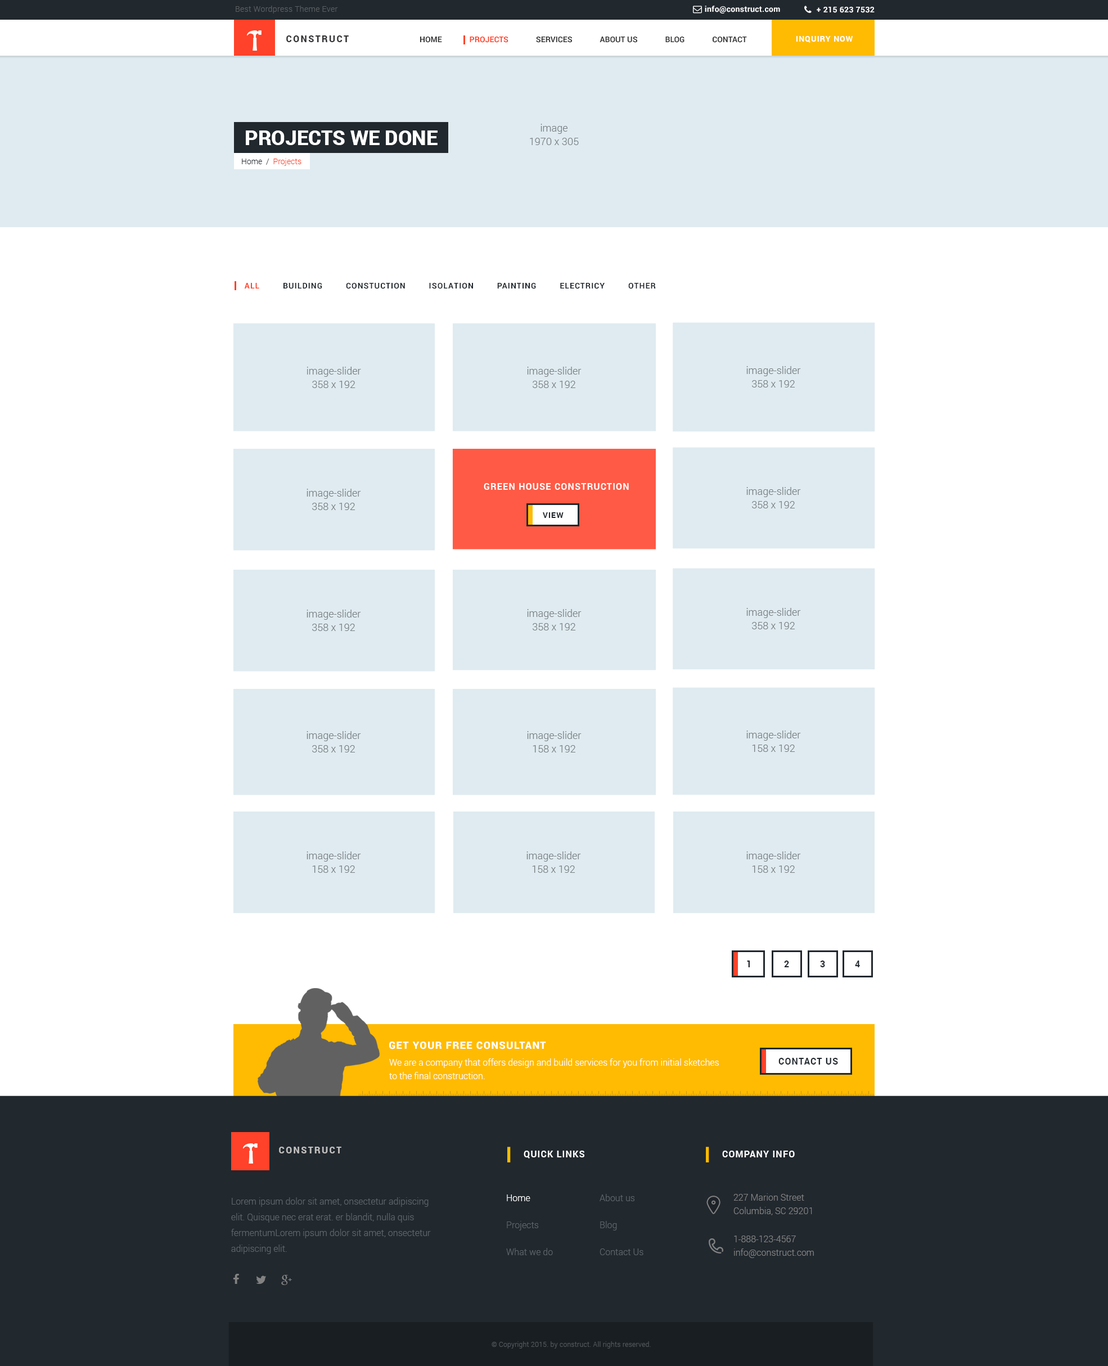
<style>
.page{position:relative;width:1108px;height:1366px;background:#ffffff}
.page>*{position:absolute;margin:0}
.t1{font:7.9px "Roboto-Light";letter-spacing:0.025em;color:#5a5f63}
.t2{font:7.9px "Roboto-Bold";letter-spacing:0.025em;color:#ffffff}
.t3{font:9px "Roboto-Black";letter-spacing:0.15em;color:#353537;text-transform:uppercase}
.t4{font:7.9px "Roboto-Bold";color:#353537}
.t5{font:7.9px "Roboto-Bold";color:#ff4229}
.t6{font:7.9px "Roboto-Bold";letter-spacing:0.075em;color:#ffffff;text-transform:uppercase}
.t7{font:10.1px/13.5px "Roboto-Light";color:#767d81}
.t8{font:20.2px "Roboto-Black";color:#ffffff;text-transform:uppercase}
.t9{font:7.9px "Roboto-Light";color:#ff4229}
.t10{font:7.9px "Roboto-Light";color:#21282e}
.t11{font:7.9px "Roboto-Bold";letter-spacing:0.075em;color:#21282e;text-transform:uppercase}
.t12{font:7.9px "Roboto-Bold";letter-spacing:0.075em;color:#ff4229;text-transform:uppercase}
.t13{font:9px "Roboto-Bold";letter-spacing:0.075em;color:#ffffff;text-transform:uppercase}
.t14{font:9px "Roboto-Bold";letter-spacing:0.075em;color:#21282e;text-transform:uppercase}
.t15{font:10.1px "Roboto-Black";letter-spacing:0.075em;color:#ffffff;text-transform:uppercase}
.t16{font:9px/13.5px "Roboto-Light";color:#ffffff}
.t17{font:9px "Roboto-Black";letter-spacing:0.15em;color:#c0bfbe;text-transform:uppercase}
.t18{font:9px/13.5px "Roboto-Light";color:#828282}
.t19{font:9px/15.8px "Roboto-Light";color:#5e656a}
.t20{font:9px/27px "Roboto-Light";color:#5e656a}
.t21{font:9px/27px "Roboto-Light";color:#ffffff}
.t22{font:6.8px "Roboto-Light";letter-spacing:0.025em;color:#52595e}
</style>
<div class="page">
<p class="t1" style="left:236px;top:6px;width:102px;height:8px">Best Wordpress Theme Ever</p>
<p class="t2" style="left:705px;top:6px;width:75px;height:8px">info@construct.com</p>
<p class="t2" style="left:817px;top:7px;width:58px;height:6px">+ 215 623 7532</p>
<p class="t3" style="left:286px;top:35px;width:63px;height:7px">Construct</p>
<p class="t4" style="left:420px;top:37px;width:327px;height:6px">HOME              <span class="t5">PROJECTS</span>              SERVICES              ABOUT US              BLOG              CONTACT</p>
<p class="t6" style="left:796px;top:36px;width:57px;height:7px">Inquiry Now</p>
<p class="t7" style="left:530px;top:124px;width:49px;height:21px;text-align:center">image<br>1970 x 305</p>
<p class="t8" style="left:246px;top:130px;width:192px;height:15px">Projects we done</p>
<p class="t9" style="left:242px;top:158px;width:60px;height:8px"><span class="t10">Home  /  </span>Projects</p>
<p class="t11" style="left:244px;top:283px;width:412px;height:6px"><span class="t12">All</span>         Building         Constuction         Isolation         Painting         Electricy         Other</p>
<p class="t7" style="left:307px;top:367px;width:54px;height:21px;text-align:center">image-slider<br>358 x 192</p>
<p class="t7" style="left:527px;top:367px;width:55px;height:21px;text-align:center">image-slider<br>358 x 192</p>
<p class="t7" style="left:746px;top:366px;width:55px;height:22px;text-align:center">image-slider<br>358 x 192</p>
<p class="t13" style="left:484px;top:483px;width:145px;height:7px">Green House Construction</p>
<p class="t7" style="left:307px;top:489px;width:54px;height:21px;text-align:center">image-slider<br>358 x 192</p>
<p class="t7" style="left:746px;top:487px;width:55px;height:21px;text-align:center">image-slider<br>358 x 192</p>
<p class="t11" style="left:543px;top:512px;width:21px;height:6px">View</p>
<p class="t7" style="left:307px;top:610px;width:54px;height:21px;text-align:center">image-slider<br>358 x 192</p>
<p class="t7" style="left:527px;top:609px;width:55px;height:22px;text-align:center">image-slider<br>358 x 192</p>
<p class="t7" style="left:746px;top:608px;width:55px;height:21px;text-align:center">image-slider<br>358 x 192</p>
<p class="t7" style="left:307px;top:731px;width:54px;height:22px;text-align:center">image-slider<br>358 x 192</p>
<p class="t7" style="left:527px;top:731px;width:55px;height:22px;text-align:center">image-slider<br>158 x 192</p>
<p class="t7" style="left:746px;top:731px;width:55px;height:21px;text-align:center">image-slider<br>158 x 192</p>
<p class="t7" style="left:307px;top:852px;width:54px;height:21px;text-align:center">image-slider<br>158 x 192</p>
<p class="t7" style="left:526px;top:852px;width:55px;height:21px;text-align:center">image-slider<br>158 x 192</p>
<p class="t7" style="left:746px;top:852px;width:55px;height:21px;text-align:center">image-slider<br>158 x 192</p>
<p class="t14" style="left:747px;top:961px;width:3px;height:7px">1</p>
<p class="t14" style="left:784px;top:961px;width:5px;height:7px">2</p>
<p class="t14" style="left:820px;top:961px;width:5px;height:7px">3</p>
<p class="t14" style="left:855px;top:961px;width:5px;height:7px">4</p>
<p class="t15" style="left:389px;top:1042px;width:157px;height:8px">Get Your Free Consultant</p>
<p class="t16" style="left:389px;top:1059px;width:330px;height:20px">We are a company that offers design and build services for you from initial sketches <br>to the final construction.</p>
<p class="t14" style="left:778px;top:1058px;width:60px;height:7px">Contact US</p>
<p class="t17" style="left:279px;top:1147px;width:62px;height:7px">Construct</p>
<p class="t13" style="left:524px;top:1151px;width:60px;height:8px">Quick Links</p>
<p class="t13" style="left:722px;top:1151px;width:73px;height:7px">Company Info</p>
<p class="t18" style="left:734px;top:1194px;width:78px;height:22px">227 Marion Street<br>Columbia, SC 29201</p>
<p class="t19" style="left:231px;top:1198px;width:200px;height:56px">Lorem ipsum dolor sit amet, onsectetur adipiscing elit. Quisque nec erat erat. er blandit, nulla quis fermentumLorem ipsum dolor sit amet, onsectetur adipiscing elit.</p>
<p class="t20" style="left:506px;top:1195px;width:47px;height:61px"><span class="t21">Home<br></span>Projects<br>What we do</p>
<p class="t20" style="left:600px;top:1194px;width:44px;height:62px">About us<br>Blog<br>Contact Us</p>
<p class="t18" style="left:734px;top:1236px;width:80px;height:22px">1-888-123-4567<br>info@construct.com</p>
<p class="t22" style="left:492px;top:1342px;width:159px;height:7px">© Copyright 2015. by construct. All rights reserved.</p>
</div>
